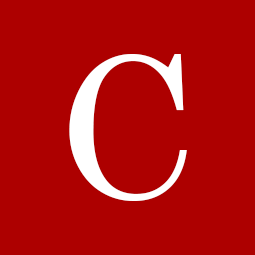
<style>
.page{position:relative;width:255px;height:255px;background:#ad0000}
.page>*{position:absolute;margin:0}
.t1{font:194px "Century";color:#ffffff}
</style>
<div class="page">
<p class="t1" style="left:69px;top:54px;width:118px;height:147px">C</p>
</div>
